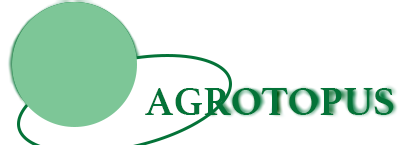
<style>
.page{position:relative;width:405px;height:145px;background:#ffffff}
.page>*{position:absolute;margin:0}
.t1{font:41px "Athelas-Bold";color:#047338}
</style>
<div class="page">
<p class="t1" style="left:145px;top:88px;width:249px;height:27px">AGROTOPUS</p>
</div>
